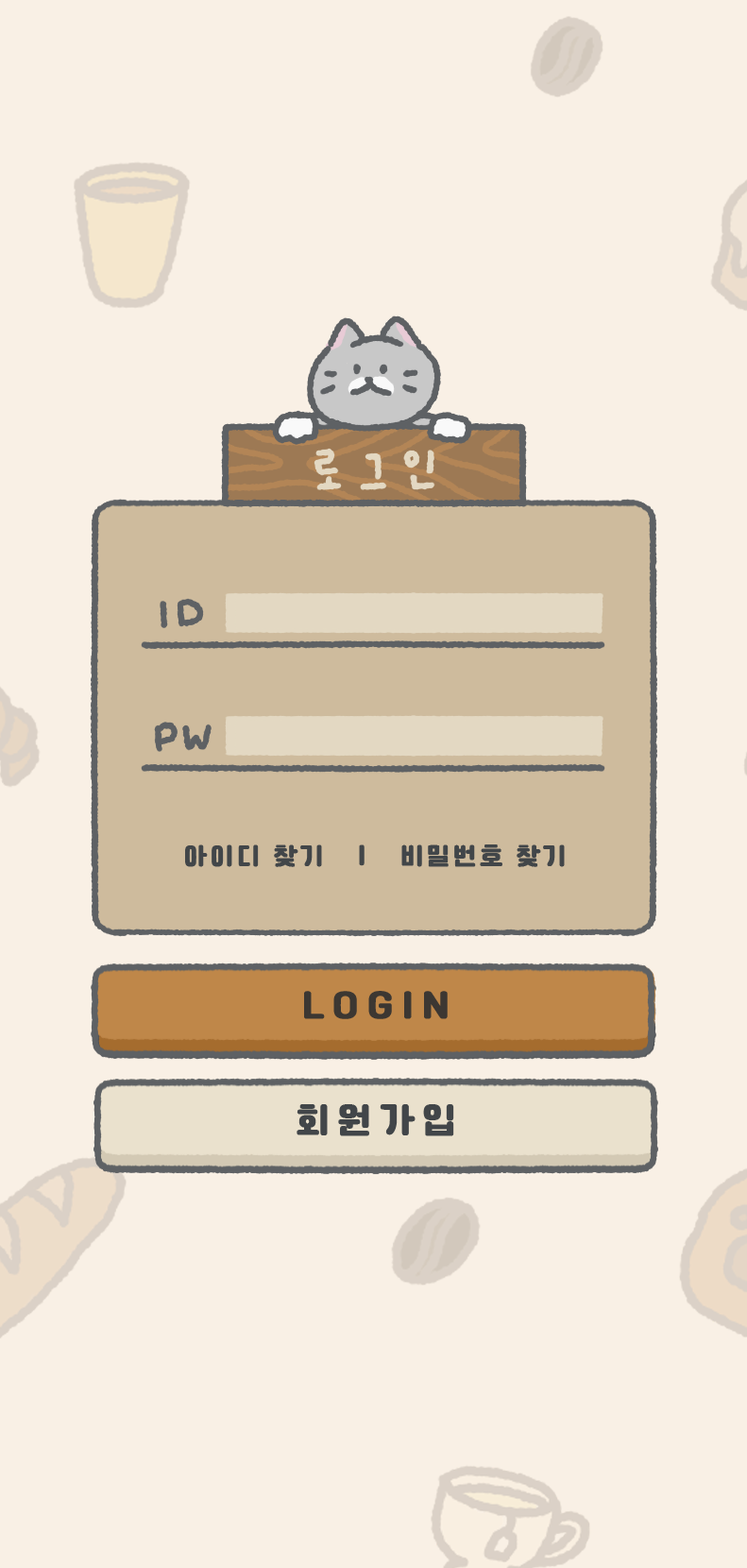
<style>
.page{position:relative;width:747px;height:1568px;background:#f9f0e5}
.page>*{position:absolute;margin:0}
.t1{font:24.6px "Cafe24Ssurround";letter-spacing:0.1em;color:#424649;font-weight:bold}
.t2{font:35.9px "Cafe24Ssurround";letter-spacing:0.2em;color:#3c3732;font-weight:bold}
.t3{font:35.9px "Cafe24Ssurround";letter-spacing:0.2em;color:#424649;font-weight:bold}
</style>
<div class="page">
<p class="t1" style="left:185px;top:844px;width:380px;height:23px">아이디 찾기   |   비밀번호 찾기</p>
<p class="t2" style="left:304px;top:991px;width:144px;height:28px">LOGIN</p>
<p class="t3" style="left:297px;top:1104px;width:157px;height:32px">회원가입</p>
</div>
